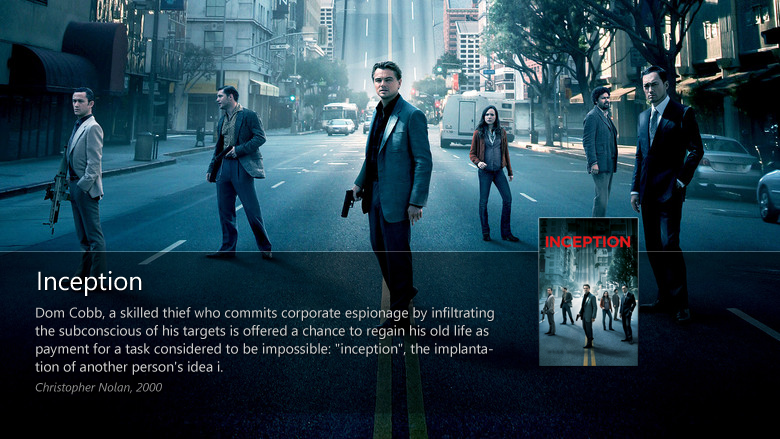
<style>
.page{position:relative;width:780px;height:439px}
.page>*{position:absolute;margin:0}
.t1{font:26px "Segoe";color:#ffffff}
.t2{font:14px/18px "SegoeUI";color:#cccccc}
.t3{font:12px/18px "SegoeUI-Italic";color:#8f8f8f}
</style>
<div class="page">
<p class="t1" style="left:38px;top:271px;width:104px;height:25px">Inception</p>
<p class="t2" style="left:35px;top:307px;width:459px;height:88px">Dom Cobb, a skilled thief who commits corporate espionage by infiltrating the subconscious of his targets is offered a chance to regain his old life as payment for a task considered to be impossible: "inception", the implantation of another person's idea i.<br><span class="t3">Christopher Nolan, 2000</span></p>
</div>
